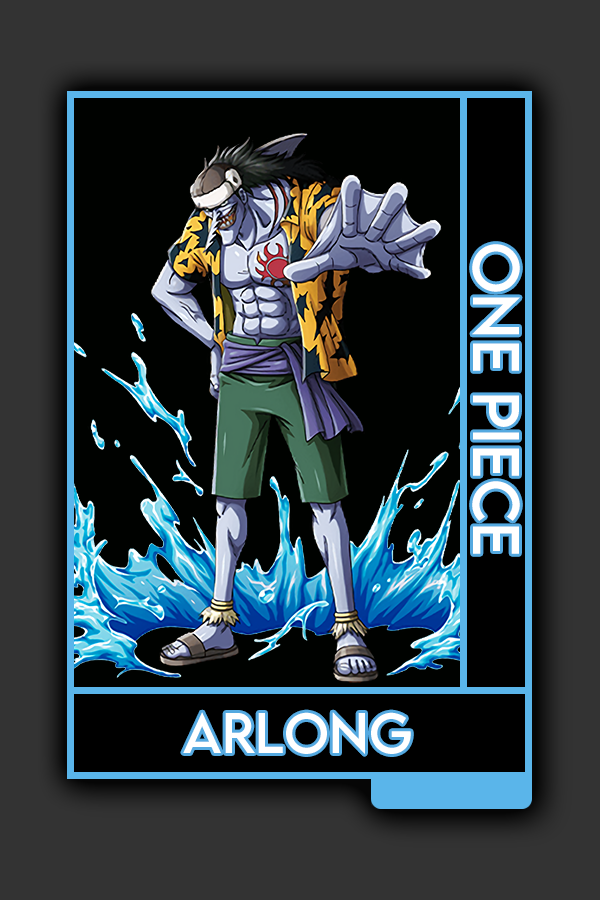
<style>
.page{position:relative;width:600px;height:900px;background:#333333}
.page>*{position:absolute;margin:0}
.t1{font:58.4px "LEMONMILK-Regular";color:#ffffff}
.t2{font:50.5px "LEMONMILK-Regular";color:#ffffff}
</style>
<div class="page">
<p class="t1" style="left:472px;top:244px;width:48px;height:310px;rotate:90deg">One Piece</p>
<p class="t2" style="left:183px;top:712px;width:228px;height:42px">Arlong</p>
</div>
